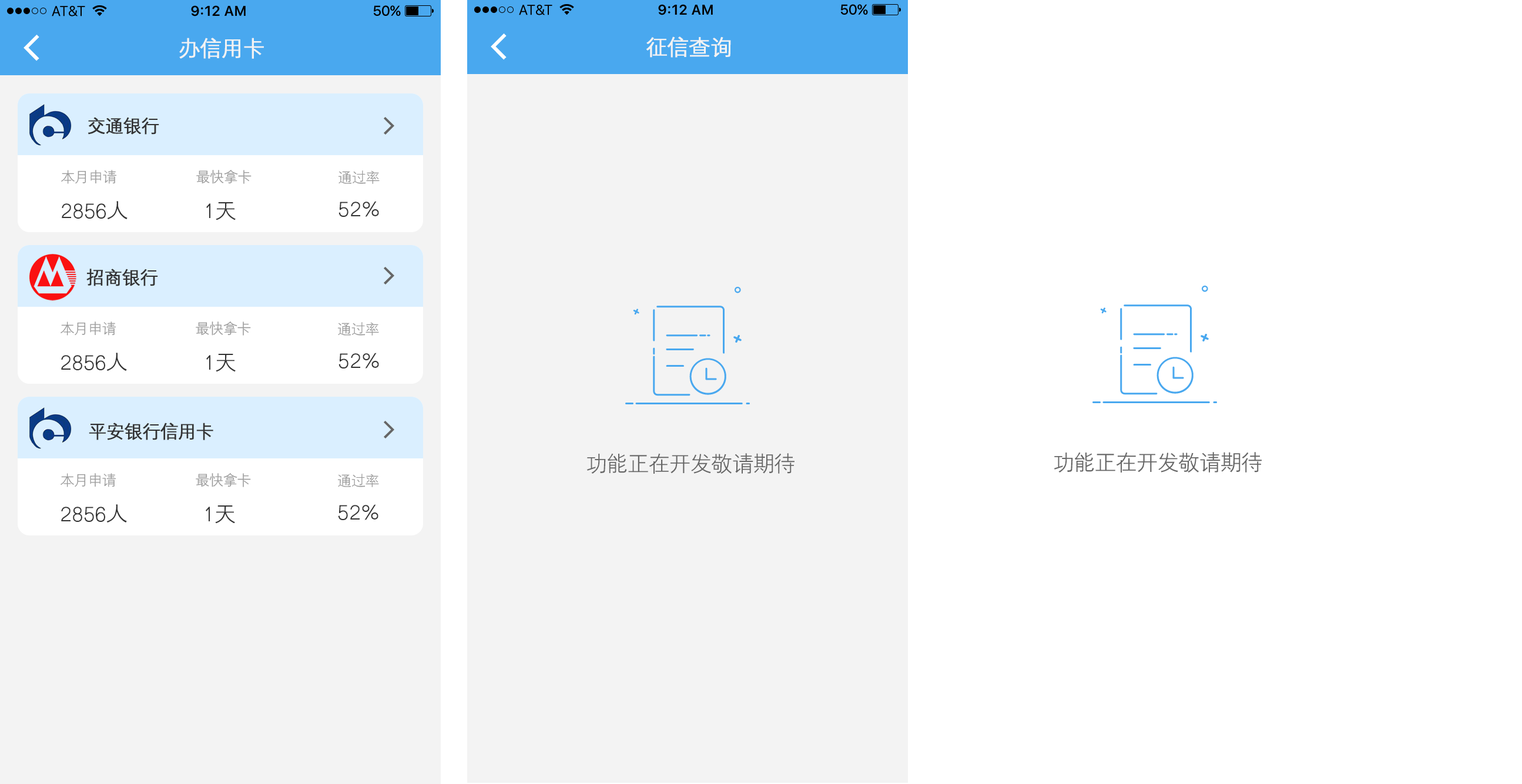
<style>
.page{position:relative;width:1522px;height:784px;background:#ffffff}
.page>*{position:absolute;margin:0}
.t1{font:21.1px "HYZhongJianHeiJ";letter-spacing:-0.01em;color:#f3f3f3;font-weight:bold}
.t2{font:17.6px "HYZhongJianHeiJ";letter-spacing:-0.01em;color:#333333;font-weight:bold}
.t3{font:14.1px "HYZhongJianHeiJ";letter-spacing:-0.01em;color:#999999}
.t4{font:21.1px "HYZhongJianHeiJ";letter-spacing:-0.01em;color:#333333}
.t5{font:21.1px "HYZhongJianHeiJ";letter-spacing:-0.01em;color:#666666}
</style>
<div class="page">
<p class="t1" style="left:179px;top:38px;width:85px;height:21px">办信用卡</p>
<p class="t1" style="left:646px;top:36px;width:85px;height:22px">征信查询</p>
<p class="t2" style="left:88px;top:117px;width:71px;height:18px">交通银行</p>
<p class="t3" style="left:61px;top:170px;width:56px;height:14px">本月申请</p>
<p class="t3" style="left:196px;top:170px;width:55px;height:14px">最快拿卡</p>
<p class="t3" style="left:338px;top:170px;width:42px;height:14px">通过率</p>
<p class="t4" style="left:62px;top:201px;width:65px;height:19px">2856人</p>
<p class="t4" style="left:206px;top:202px;width:30px;height:18px">1天</p>
<p class="t4" style="left:338px;top:201px;width:41px;height:16px">52%</p>
<p class="t2" style="left:86px;top:268px;width:72px;height:18px">招商银行</p>
<p class="t3" style="left:61px;top:321px;width:55px;height:14px">本月申请</p>
<p class="t3" style="left:196px;top:321px;width:55px;height:14px">最快拿卡</p>
<p class="t3" style="left:338px;top:322px;width:41px;height:13px">通过率</p>
<p class="t4" style="left:61px;top:352px;width:66px;height:19px">2856人</p>
<p class="t4" style="left:206px;top:354px;width:30px;height:18px">1天</p>
<p class="t4" style="left:338px;top:352px;width:41px;height:16px">52%</p>
<p class="t2" style="left:89px;top:422px;width:124px;height:18px">平安银行信用卡</p>
<p class="t5" style="left:586px;top:453px;width:208px;height:21px">功能正在开发敬请期待</p>
<p class="t5" style="left:1053px;top:452px;width:208px;height:20px">功能正在开发敬请期待</p>
<p class="t3" style="left:61px;top:473px;width:55px;height:14px">本月申请</p>
<p class="t3" style="left:196px;top:473px;width:55px;height:14px">最快拿卡</p>
<p class="t3" style="left:338px;top:474px;width:41px;height:13px">通过率</p>
<p class="t4" style="left:61px;top:504px;width:66px;height:19px">2856人</p>
<p class="t4" style="left:206px;top:505px;width:29px;height:18px">1天</p>
<p class="t4" style="left:338px;top:504px;width:40px;height:16px">52%</p>
</div>
